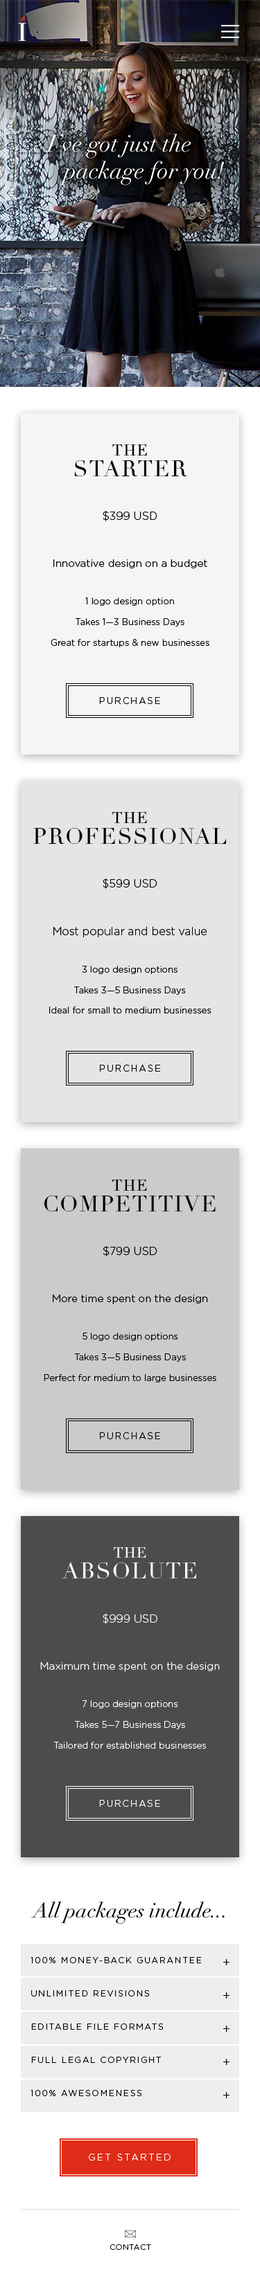
<style>
.page{position:relative;width:260px;height:2272px}
.page>*{position:absolute;margin:0}
.t1{font:22.2px/20.7px "Didot";letter-spacing:0.05em;color:#000000;text-transform:uppercase}
.t2{font:22.2px/20.7px "Didot";letter-spacing:0.05em;color:#000000;font-variant:small-caps}
.t3{font:11.1px "Gotham-Light";color:#000000}
.t4{font:9px/20.7px "Gotham-Light";color:#000000}
.t5{font:10.4px/16.5px "Gotham-Light";color:#000000}
.t6{font:9px "Gotham-Light";letter-spacing:0.15em;color:#060606;text-transform:uppercase}
.t7{font:11.1px/16.5px "Gotham-Light";color:#000000}
.t8{font:22.2px/20.7px "Didot";letter-spacing:0.05em;color:#ffffff;text-transform:uppercase}
.t9{font:20.7px/20.7px "Didot";letter-spacing:0.05em;color:#ffffff;font-variant:small-caps}
.t10{font:11.1px "Gotham-Light";color:#ffffff}
.t11{font:9px/20.7px "Gotham-Light";color:#ffffff}
.t12{font:10.4px/16.5px "Gotham-Light";color:#ffffff}
.t13{font:9px "Gotham-Light";letter-spacing:0.15em;color:#ffffff;text-transform:uppercase}
.t14{font:20.8px "Didot-Italic";color:#000000}
.t15{font:8.3px/33.2px "Gotham-Light";letter-spacing:0.15em;color:#000000;text-transform:uppercase}
.t16{font:12.5px/33.2px "Gotham-Light";color:#000000}
.t17{font:9px "Gotham-Light";letter-spacing:0.2em;color:#ffffff;text-transform:uppercase}
.t18{font:7.6px "Gotham-Light";letter-spacing:0.05em;color:#010101;text-transform:uppercase}
</style>
<div class="page">
<p class="t1" style="left:74px;top:444px;width:113px;height:32px;text-align:center"><span class="t2">the<br></span>starter</p>
<p class="t3" style="left:102px;top:511px;width:55px;height:10px">$399 USD</p>
<p class="t4" style="left:51px;top:559px;width:158px;height:88px;text-align:center"><span class="t5">Innovative design on a budget<br><br></span>1 logo design option<br>Takes 1—3 Business Days<br>Great for startups &amp; new businesses</p>
<p class="t6" style="left:99px;top:697px;width:61px;height:7px">purchase</p>
<p class="t1" style="left:33px;top:812px;width:193px;height:32px;text-align:center"><span class="t2">the<br></span>professional</p>
<p class="t3" style="left:102px;top:879px;width:55px;height:10px">$599 USD</p>
<p class="t4" style="left:49px;top:926px;width:162px;height:88px;text-align:center"><span class="t7">Most popular and best value<br><br></span>3 logo design options<br>Takes 3—5 Business Days<br>Ideal for small to medium businesses</p>
<p class="t6" style="left:100px;top:1065px;width:60px;height:7px">purchase</p>
<p class="t1" style="left:44px;top:1180px;width:171px;height:32px;text-align:center"><span class="t2">the<br></span>competitive</p>
<p class="t3" style="left:102px;top:1246px;width:55px;height:11px">$799 USD</p>
<p class="t4" style="left:44px;top:1295px;width:172px;height:88px;text-align:center"><span class="t5">More time spent on the design<br><br></span>5 logo design options<br>Takes 3—5 Business Days<br>Perfect for medium to large businesses</p>
<p class="t6" style="left:100px;top:1432px;width:60px;height:7px">purchase</p>
<p class="t8" style="left:62px;top:1547px;width:134px;height:31px;text-align:center"><span class="t9">the<br></span>absolute</p>
<p class="t10" style="left:102px;top:1614px;width:55px;height:10px">$999 USD</p>
<p class="t11" style="left:40px;top:1662px;width:179px;height:87px;text-align:center"><span class="t12">Maximum time spent on the design<br><br></span>7 logo design options<br>Takes 5—7 Business Days<br>Tailored for established businesses</p>
<p class="t13" style="left:99px;top:1800px;width:61px;height:7px">purchase</p>
<p class="t14" style="left:31px;top:1902px;width:193px;height:22px">All packages include...</p>
<p class="t15" style="left:30px;top:1957px;width:171px;height:139px">100% Money-back Guarantee<br>Unlimited Revisions<br>Editable File Formats<br>Full Legal Copyright<br>100% Awesomeness</p>
<p class="t16" style="left:223px;top:1959px;width:6px;height:139px;text-align:right">+<br>+<br>+<br>+<br>+</p>
<p class="t17" style="left:89px;top:2154px;width:81px;height:7px">get started</p>
<p class="t18" style="left:109px;top:2244px;width:42px;height:6px">CONTACT</p>
</div>
